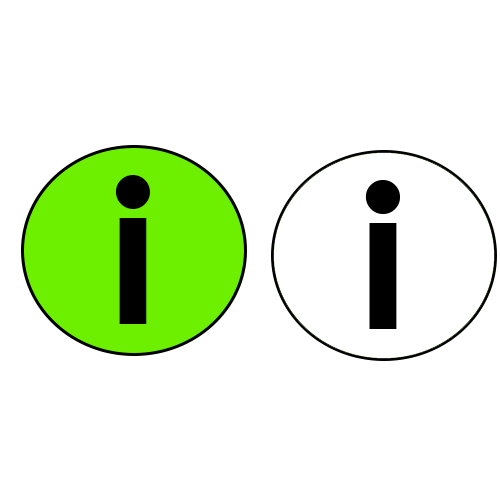
<style>
.page{position:relative;width:500px;height:500px;background:#ffffff}
.page>*{position:absolute;margin:0}
.t1{font:200px "CenturyGothic-Bold";color:#000000}
</style>
<div class="page">
<p class="t1" style="left:115px;top:175px;width:35px;height:149px">i</p>
<p class="t1" style="left:365px;top:180px;width:35px;height:149px">i</p>
</div>
